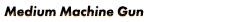
<style>
.page{position:relative;width:243px;height:22px;background:#ffffff}
.page>*{position:absolute;margin:0}
.t1{font:14px "FuturaPT-HeavyObl";color:#000000}
</style>
<div class="page">
<p class="t1" style="left:4px;top:5px;width:140px;height:12px">Medium Machine Gun</p>
</div>
